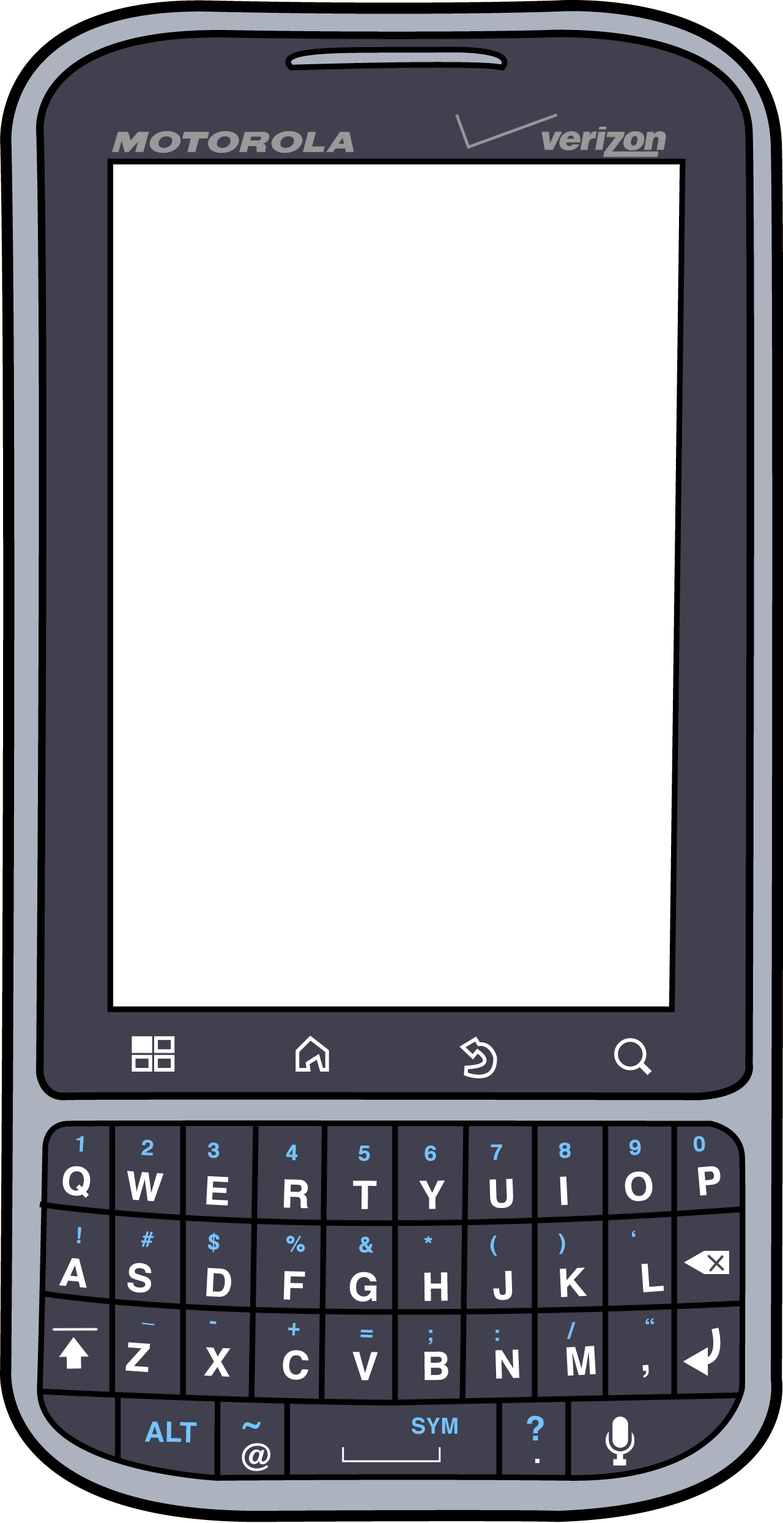
<style>
.page{position:relative;width:783px;height:1523px;background:#ffffff}
.page>*{position:absolute;margin:0}
.t1{font:22px "Helvetica-Bold";letter-spacing:-0.005em;color:#76c3ff}
.t2{font:39.1px "Helvetica-Bold";letter-spacing:-0.005em;color:#ffffff}
.t3{font:28.1px "Helvetica-Bold";letter-spacing:-0.005em;color:#76c3ff}
.t4{font:30.7px "Helvetica-Bold";letter-spacing:-0.005em;color:#76c3ff}
.t5{font:33.8px "Helvetica-Bold";letter-spacing:-0.005em;color:#76c3ff}
.t6{font:36.1px "Helvetica-Bold";letter-spacing:-0.005em;color:#ffffff}
</style>
<div class="page">
<p class="t1" style="left:76px;top:1136px;width:629px;height:26px">1    2   3     4     5     6     7        8       9      0</p>
<p class="t2" style="left:62px;top:1166px;width:659px;height:43px">Q    W   E    R    T    Y    U    I     O    P</p>
<p class="t1" style="left:77px;top:1227px;width:559px;height:29px">!    #   $     %     &amp;     *     (        )           ‘</p>
<p class="t2" style="left:59px;top:1258px;width:605px;height:44px">A    S   D    F    G    H    J    K     L</p>
<p class="t1" style="left:142px;top:1318px;width:512px;height:27px;rotate:1deg">_   -     +     =     ;     :         /         “</p>
<p class="t2" style="left:125px;top:1342px;width:524px;height:39px">Z   X    C    V    B    N    M    ,</p>
<p class="t3" style="left:144px;top:1422px;width:53px;height:21px;rotate:1deg">ALT</p>
<p class="t4" style="left:242px;top:1422px;width:19px;height:7px">~</p>
<p class="t1" style="left:412px;top:1417px;width:46px;height:17px">SYM</p>
<p class="t5" style="left:527px;top:1415px;width:17px;height:25px">?</p>
<p class="t6" style="left:242px;top:1443px;width:28px;height:28px">@</p>
</div>
